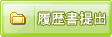
<style>
.page{position:relative;width:112px;height:37px}
.page>*{position:absolute;margin:0}
.t1{font:14px "MS-Gothic";color:#ffffff;text-transform:uppercase}
</style>
<div class="page">
<p class="t1" style="left:37px;top:12px;width:69px;height:13px">履歴書提出</p>
</div>
